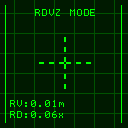
<style>
.page{position:relative;width:128px;height:128px;background:#001a00}
.page>*{position:absolute;margin:0}
.t1{font:9px "Terminal";letter-spacing:0.1em;color:#00ff00}
</style>
<div class="page">
<p class="t1" style="left:35px;top:9px;width:60px;height:7px">RDVZ MODE</p>
<p class="t1" style="left:10px;top:100px;width:54px;height:18px">RV:0.01m<br>RD:0.06x</p>
</div>
